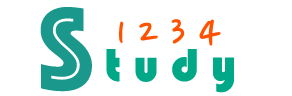
<style>
.page{position:relative;width:292px;height:96px;background:#ffffff}
.page>*{position:absolute;margin:0}
.t1{font:120px "Phosphate-Inline";color:#19988b}
.t2{font:48px "NanumPen";color:#ff5200}
.t3{font:48px "Bauhaus93";color:#00a888}
</style>
<div class="page">
<p class="t1" style="left:40px;top:7px;width:52px;height:85px">S</p>
<p class="t2" style="left:119px;top:19px;width:102px;height:27px">1 2 3 4</p>
<p class="t3" style="left:106px;top:49px;width:128px;height:44px">t u d y</p>
</div>
